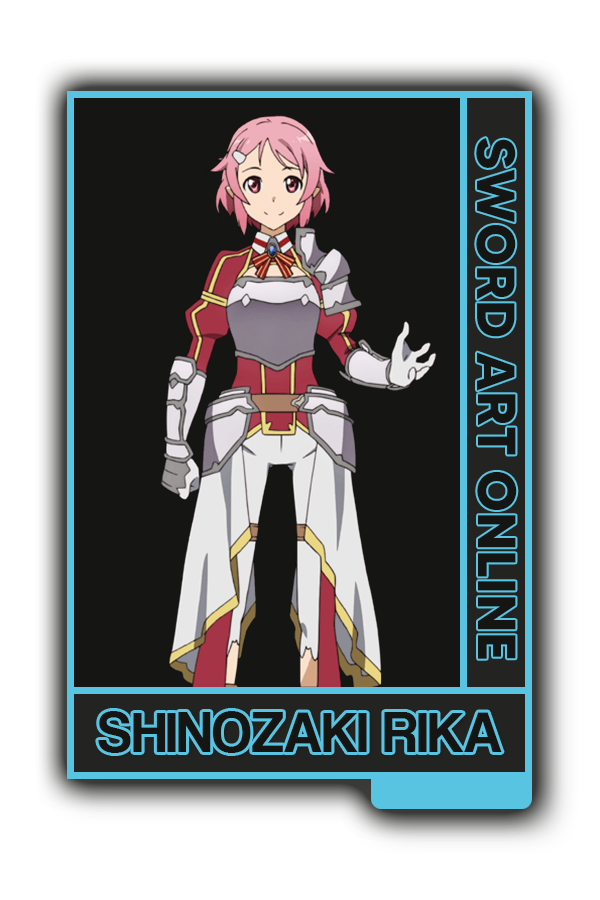
<style>
.page{position:relative;width:600px;height:900px;background:#151514}
.page>*{position:absolute;margin:0}
.t1{font:53.7px "MADETOMMY-Bold";color:#151514}
.t2{font:59.1px "CoolveticaRg-Regular";color:#151514}
</style>
<div class="page">
<p class="t1" style="left:476px;top:138px;width:41px;height:521px;rotate:90deg">SWORD ART ONLINE</p>
<p class="t2" style="left:98px;top:711px;width:404px;height:42px">SHINOZAKI RIKA</p>
</div>
